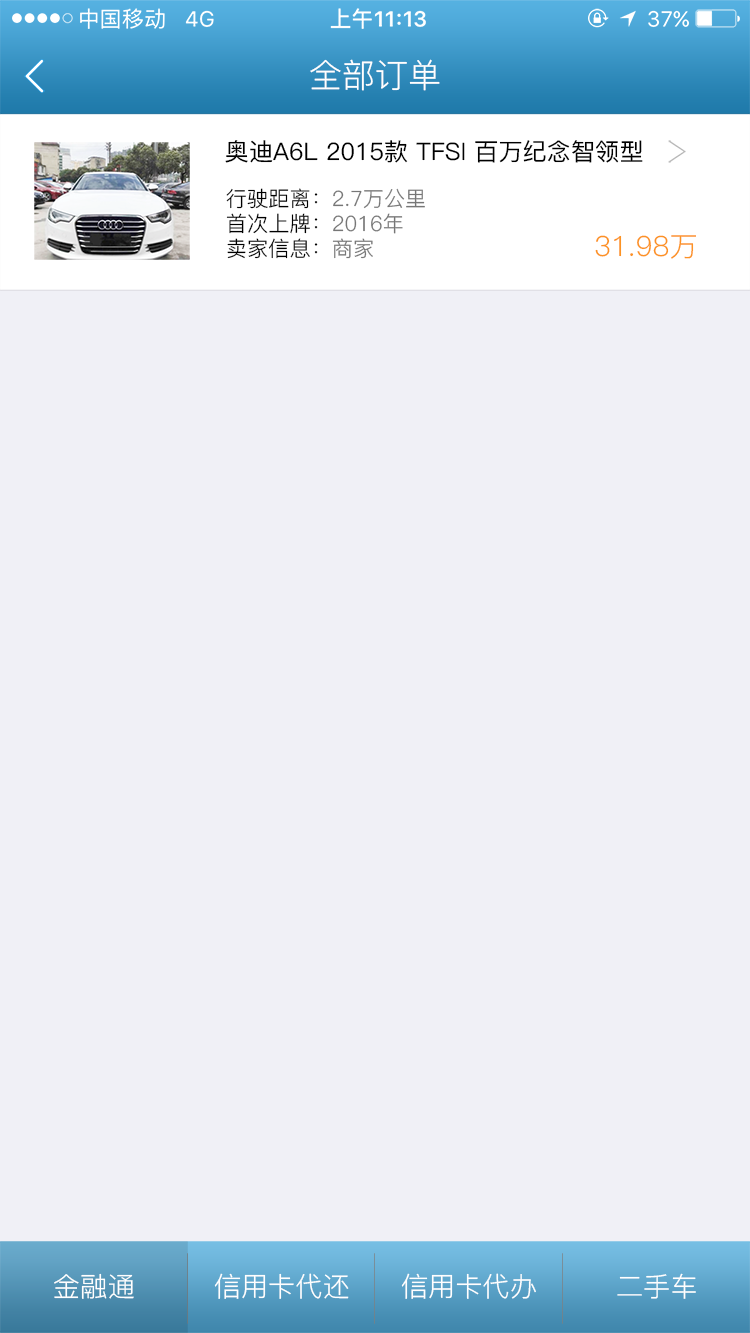
<style>
.page{position:relative;width:750px;height:1333px;background:#f0f0f6}
.page>*{position:absolute;margin:0}
.t1{font:33.3px "PingFang-SC-Regular";color:#ffffff}
.t2{font:24.1px "PingFang-SC-Medium";color:#000000}
.t3{font:21.1px "PingFang-SC-Regular";color:#767676}
.t4{font:21.1px "PingFang-SC-Regular";color:#000000}
.t5{font:27.9px "PingFang-SC-Regular";color:#fc9323}
.t6{font:27.2px "PingFang-SC-Regular";color:#ffffff}
</style>
<div class="page">
<p class="t1" style="left:310px;top:59px;width:130px;height:32px">全部订单</p>
<p class="t2" style="left:225px;top:140px;width:418px;height:23px">奥迪A6L 2015款 TFSI 百万纪念智领型</p>
<p class="t3" style="left:226px;top:188px;width:199px;height:71px"><span class="t4">行驶距离：</span>2.7万公里<br><span class="t4">首次上牌：</span>2016年<br><span class="t4">卖家信息：</span>商家</p>
<p class="t5" style="left:595px;top:235px;width:101px;height:24px">31.98万</p>
<p class="t6" style="left:54px;top:1273px;width:80px;height:26px">金融通</p>
<p class="t6" style="left:214px;top:1273px;width:135px;height:26px">信用卡代还</p>
<p class="t6" style="left:401px;top:1273px;width:135px;height:26px">信用卡代办</p>
<p class="t6" style="left:617px;top:1273px;width:79px;height:26px">二手车</p>
</div>
